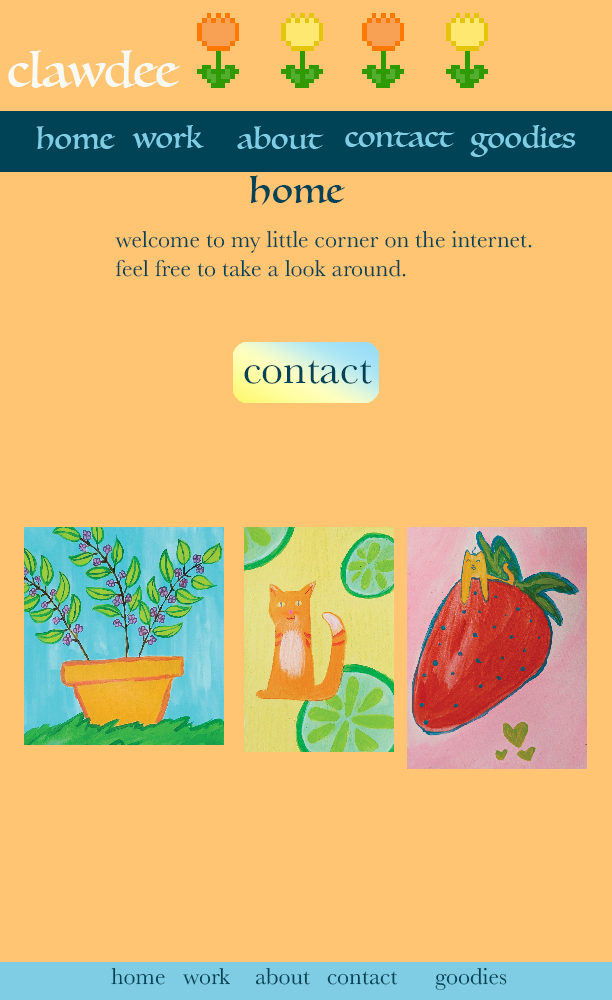
<style>
.page{position:relative;width:612px;height:1000px;background:#ffc573}
.page>*{position:absolute;margin:0}
.t1{font:48px "Luminari-Regular";color:#fafaf5}
.t2{font:30px "Luminari-Regular";color:#7ecde4}
.t3{font:36px "Luminari-Regular";color:#014356}
.t4{font:24px "Baskerville";color:#014356}
.t5{font:43.1px "Baskerville";color:#014356}
</style>
<div class="page">
<p class="t1" style="left:8px;top:50px;width:172px;height:38px">clawdee</p>
<p class="t2" style="left:36px;top:126px;width:79px;height:24px">home</p>
<p class="t2" style="left:132px;top:125px;width:72px;height:24px">work</p>
<p class="t2" style="left:237px;top:126px;width:87px;height:23px">about</p>
<p class="t2" style="left:470px;top:125px;width:106px;height:32px">goodies</p>
<p class="t2" style="left:345px;top:131px;width:110px;height:16px">contact</p>
<p class="t3" style="left:249px;top:175px;width:96px;height:30px">home</p>
<p class="t4" style="left:115px;top:230px;width:417px;height:47px">welcome to my little corner on the internet.<br>feel free to take a look around.</p>
<p class="t5" style="left:244px;top:360px;width:128px;height:24px">contact</p>
<p class="t4" style="left:111px;top:967px;width:396px;height:24px">home work about contact  goodies</p>
</div>
